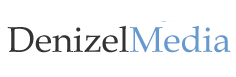
<style>
.page{position:relative;width:236px;height:77px;background:#ffffff}
.page>*{position:absolute;margin:0}
.t1{font:36px "BookAntiqua";color:#333333}
.t2{font:36px "BookAntiqua";color:#6699cc}
</style>
<div class="page">
<p class="t1" style="left:7px;top:25px;width:224px;height:28px">Denizel<span class="t2">Media</span></p>
</div>
